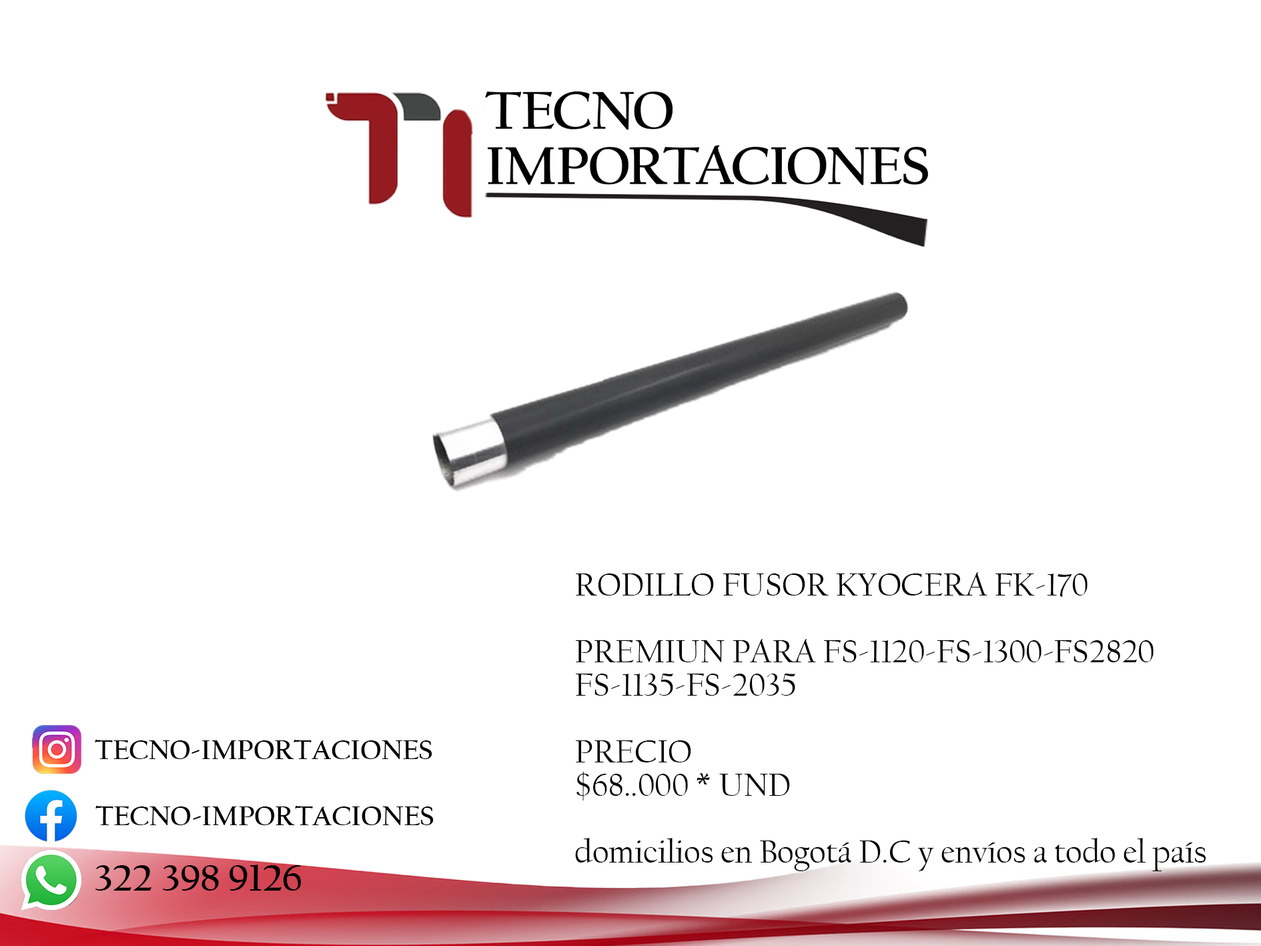
<style>
.page{position:relative;width:1261px;height:946px;background:#ffffff}
.page>*{position:absolute;margin:0}
.t1{font:33.4px/33.4px "CalifornianFB-Reg";letter-spacing:-0.005em;color:#000000}
.t2{font:27.8px "CalifornianFB-Bold";letter-spacing:-0.005em;color:#000000}
.t3{font:38.9px "CalifornianFB-Bold";letter-spacing:-0.005em;color:#000000}
</style>
<div class="page">
<p class="t1" style="left:575px;top:572px;width:631px;height:299px">RODILLO FUSOR KYOCERA FK-170<br><br>PREMIUN PARA FS-1120-FS-1300-FS2820<br>FS-1135-FS-2035<br><br>PRECIO<br>$68..000 * UND<br><br>domicilios en Bogotá D.C y envíos a todo el país</p>
<p class="t2" style="left:95px;top:739px;width:337px;height:20px">TECNO-IMPORTACIONES</p>
<p class="t2" style="left:95px;top:805px;width:339px;height:20px">TECNO-IMPORTACIONES</p>
<p class="t3" style="left:95px;top:864px;width:206px;height:26px">322 398 9126</p>
</div>
